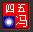
<style>
.page{position:relative;width:33px;height:32px;background:#f20000}
.page>*{position:absolute;margin:0}
.t1{font:10.4px "SimSun";color:#ffffff}
.t2{font:11.7px "SimSun";color:#ffffff}
</style>
<div class="page">
<p class="t1" style="left:6px;top:4px;width:19px;height:9px">四五</p>
<p class="t2" style="left:16px;top:15px;width:11px;height:12px">冯</p>
</div>
